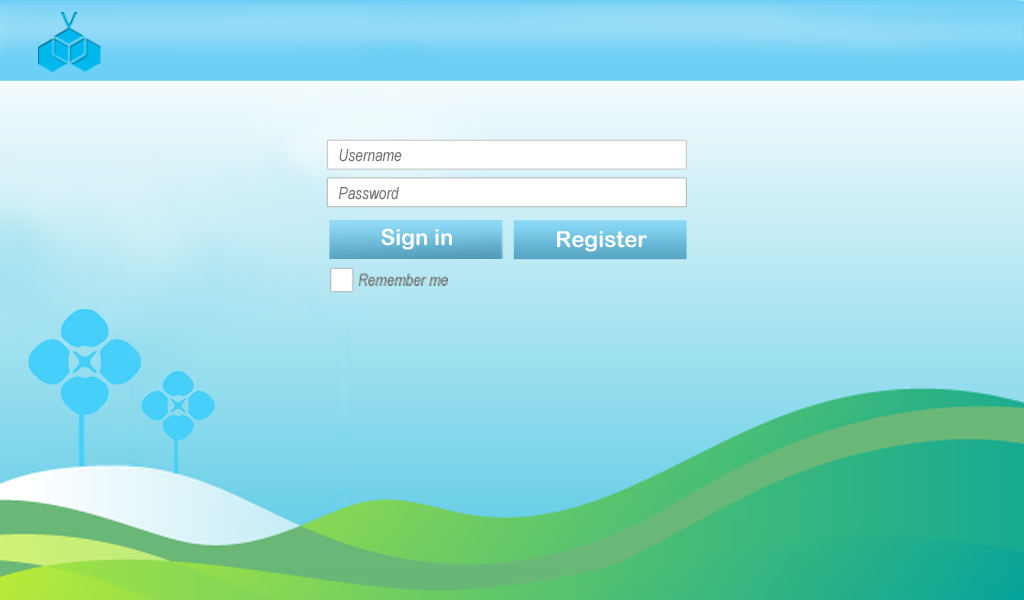
<style>
.page{position:relative;width:1024px;height:600px}
.page>*{position:absolute;margin:0}
.t1{font:16.7px "ArialNarrow-Italic";color:#737373}
.t2{font:22.2px "ArialRoundedMTBold";color:#ffffff}
</style>
<div class="page">
<p class="t1" style="left:339px;top:149px;width:63px;height:13px">Username</p>
<p class="t1" style="left:338px;top:187px;width:61px;height:13px">Password</p>
<p class="t2" style="left:381px;top:228px;width:71px;height:22px">Sign in</p>
<p class="t2" style="left:557px;top:231px;width:90px;height:21px">Register</p>
<p class="t1" style="left:359px;top:273px;width:89px;height:13px">Remember me</p>
</div>
